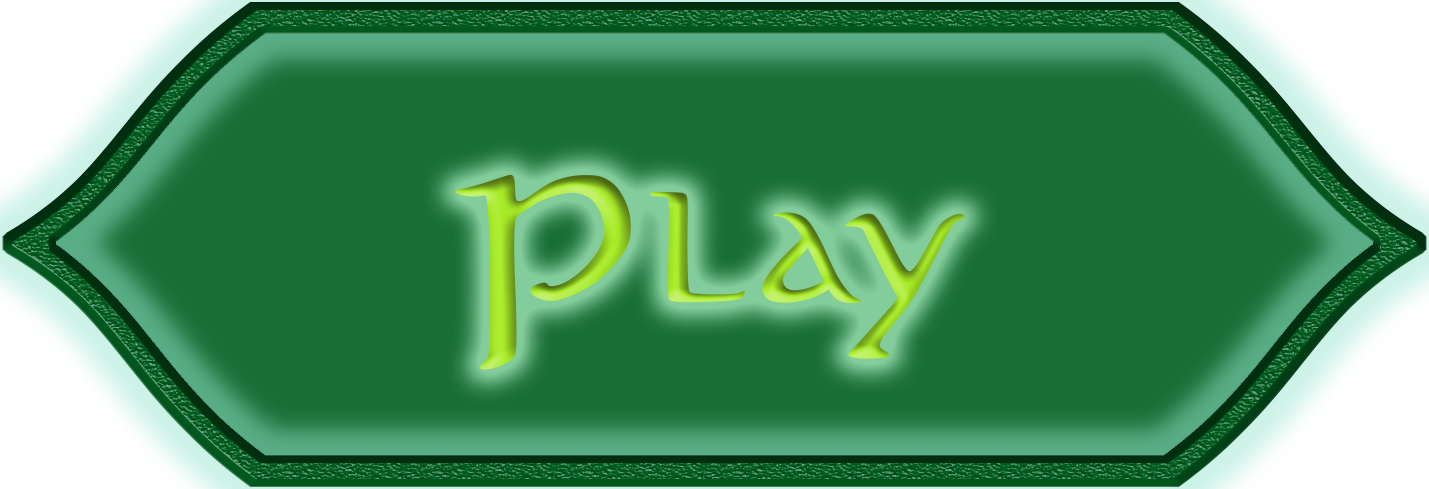
<style>
.page{position:relative;width:1429px;height:489px;background:#196e36}
.page>*{position:absolute;margin:0}
.t1{font:179.2px "MiddleEarth"}
</style>
<div class="page">
<p class="t1" style="left:455px;top:174px;width:510px;height:196px">Play</p>
</div>
